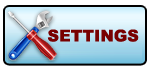
<style>
.page{position:relative;width:150px;height:70px}
.page>*{position:absolute;margin:0}
.t1{font:16.2px "Arial-Black";color:#780000}
</style>
<div class="page">
<p class="t1" style="left:47px;top:29px;width:92px;height:13px">SETTINGS</p>
</div>
